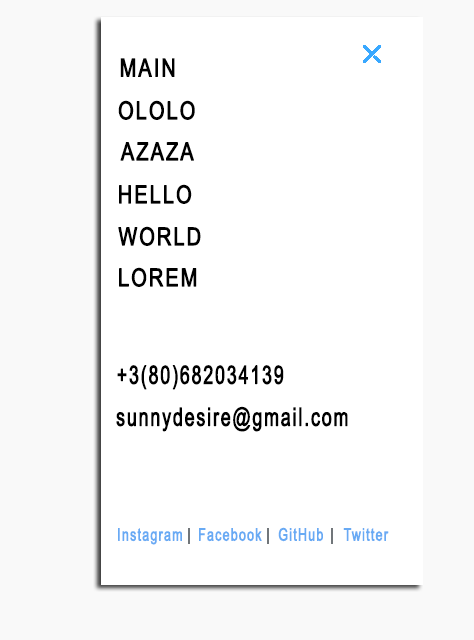
<style>
.page{position:relative;width:474px;height:640px;background:#ffffff}
.page>*{position:absolute;margin:0}
.t1{font:25.2px "ArialMT";letter-spacing:0.08em;color:#000000;font-weight:bold;scale:0.79 1}
.t2{font:24.8px "ArialMT";letter-spacing:0.08em;color:#000000;font-weight:bold;scale:0.8 1}
.t3{font:25.3px "ArialMT";letter-spacing:0.08em;color:#000000;font-weight:bold;scale:0.7 1}
.t4{font:17.3px "ArialMT";letter-spacing:0.08em;color:#68aaf4;font-weight:bold;scale:0.71 1}
</style>
<div class="page">
<p class="t1" style="left:120px;top:58px;width:55px;height:19px">MAIN</p>
<p class="t2" style="left:118px;top:100px;width:77px;height:20px">OLOLO</p>
<p class="t2" style="left:120px;top:142px;width:74px;height:19px">AZAZA</p>
<p class="t2" style="left:119px;top:184px;width:73px;height:20px">HELLO</p>
<p class="t2" style="left:118px;top:226px;width:83px;height:20px">WORLD</p>
<p class="t2" style="left:119px;top:267px;width:78px;height:20px">LOREM</p>
<p class="t3" style="left:117px;top:365px;width:167px;height:25px">+3(80)682034139</p>
<p class="t3" style="left:116px;top:406px;width:232px;height:26px">sunnydesire@gmail.com</p>
<p class="t4" style="left:118px;top:528px;width:64px;height:17px">Instagram</p>
<p class="t4" style="left:199px;top:528px;width:63px;height:14px">Facebook</p>
<p class="t4" style="left:278px;top:527px;width:45px;height:15px">GitHub</p>
<p class="t4" style="left:343px;top:528px;width:46px;height:14px">Twitter</p>
</div>
